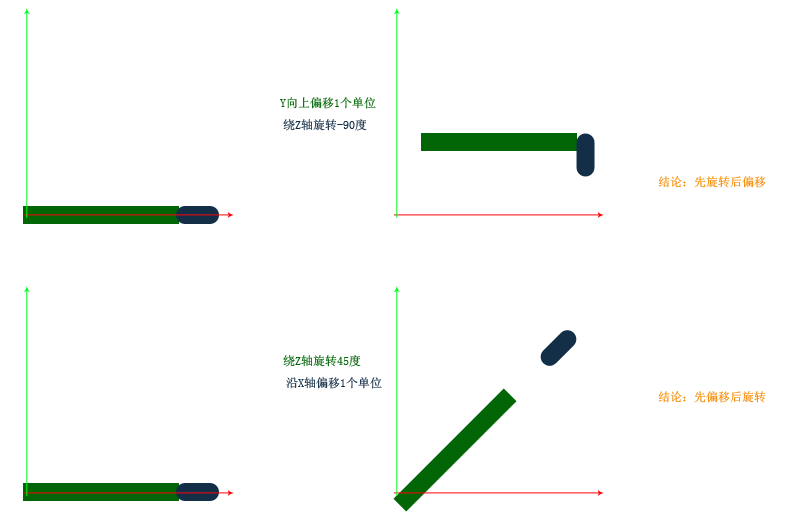
<style>
.page{position:relative;width:800px;height:512px;background:#ffffff}
.page>*{position:absolute;margin:0}
.t1{font:12px "SimSun";color:#026607}
.t2{font:12px "SimSun";color:#132e47}
.t3{font:12px "SimSun";color:#f78c02}
</style>
<div class="page">
<p class="t1" style="left:280px;top:97px;width:96px;height:12px">Y向上偏移1个单位</p>
<p class="t2" style="left:283px;top:119px;width:84px;height:12px">绕Z轴旋转-90度</p>
<p class="t3" style="left:658px;top:176px;width:108px;height:12px">结论：先旋转后偏移</p>
<p class="t1" style="left:283px;top:355px;width:78px;height:12px">绕Z轴旋转45度</p>
<p class="t2" style="left:286px;top:377px;width:96px;height:12px">沿X轴偏移1个单位</p>
<p class="t3" style="left:658px;top:391px;width:108px;height:12px">结论：先偏移后旋转</p>
</div>
